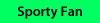
<style>
.page{position:relative;width:100px;height:23px;background:#00ff60}
.page>*{position:absolute;margin:0}
.t1{font:14px "MyriadPro-Semibold";color:#000000}
</style>
<div class="page">
<p class="t1" style="left:17px;top:6px;width:65px;height:13px">Sporty Fan</p>
</div>
